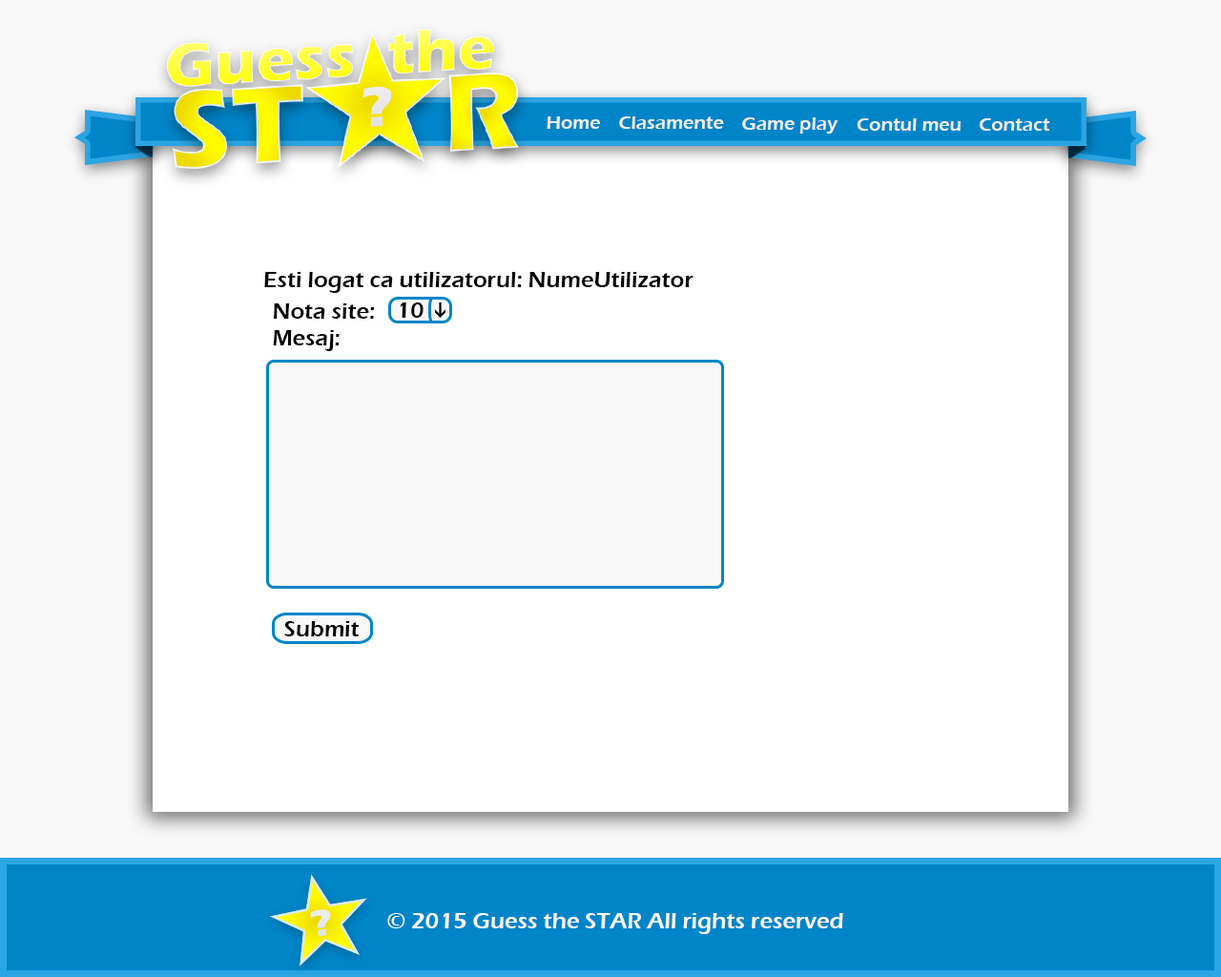
<style>
.page{position:relative;width:1221px;height:977px;background:#ffffff}
.page>*{position:absolute;margin:0}
.t1{font:19.1px "ErasITC-Demi";color:#eeeeee}
.t2{font:22.9px "ErasITC-Demi";color:#000000}
.t3{font:22.9px "ErasITC-Demi";color:#f8f8f8}
</style>
<div class="page">
<p class="t1" style="left:547px;top:116px;width:53px;height:13px">Home</p>
<p class="t1" style="left:619px;top:116px;width:105px;height:13px">Clasamente</p>
<p class="t1" style="left:742px;top:117px;width:96px;height:17px">Game play</p>
<p class="t1" style="left:857px;top:118px;width:103px;height:13px">Contul meu</p>
<p class="t1" style="left:980px;top:118px;width:70px;height:13px">Contact</p>
<p class="t2" style="left:264px;top:272px;width:429px;height:21px">Esti logat ca utilizatorul: NumeUtilizator</p>
<p class="t2" style="left:273px;top:303px;width:102px;height:48px">Nota site:<br>Mesaj:</p>
<p class="t2" style="left:401px;top:302px;width:22px;height:16px">10</p>
<p class="t2" style="left:284px;top:621px;width:76px;height:15px">Submit</p>
<p class="t3" style="left:387px;top:913px;width:456px;height:21px">© 2015 Guess the STAR All rights reserved</p>
</div>
